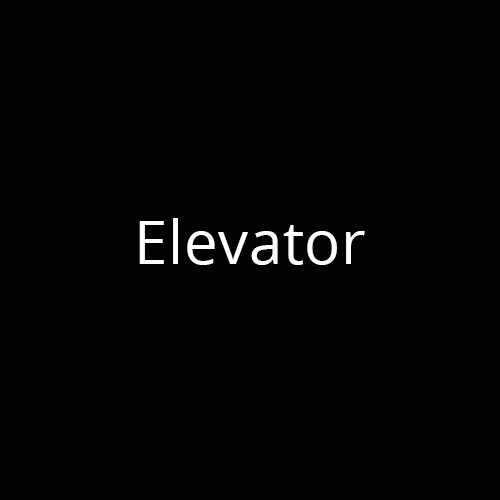
<style>
.page{position:relative;width:500px;height:500px;background:#030303}
.page>*{position:absolute;margin:0}
.t1{font:60px "OpenSans-Regular";letter-spacing:0.009em;color:#ffffff}
</style>
<div class="page">
<p class="t1" style="left:139px;top:218px;width:226px;height:47px">Elevator</p>
</div>
